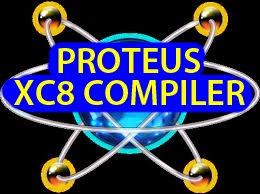
<style>
.page{position:relative;width:260px;height:194px;background:#000000}
.page>*{position:absolute;margin:0}
.t1{font:36px "MyriadPro-Semibold";color:#ffff00}
</style>
<div class="page">
<p class="t1" style="left:58px;top:48px;width:142px;height:25px">PROTEUS</p>
<p class="t1" style="left:14px;top:80px;width:231px;height:25px">XC8 COMPILER</p>
</div>
